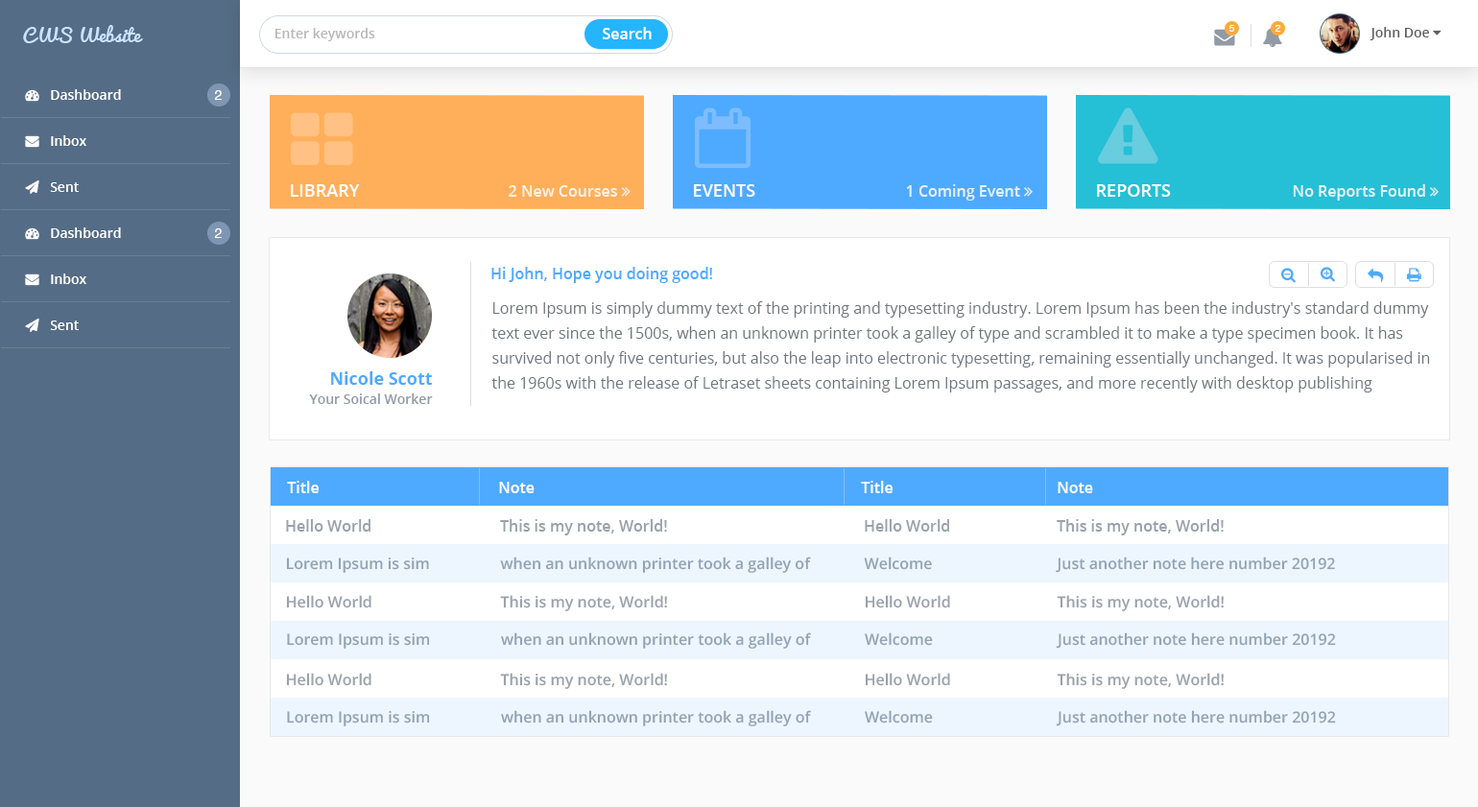
<style>
.page{position:relative;width:1478px;height:807px;background:#ffffff}
.page>*{position:absolute;margin:0}
.t1{font:18.3px "Pacifico";color:#cbe3ff}
.t2{font:13.4px "OpenSans-Semibold";color:#b8b8b8}
.t3{font:15.4px "OpenSans-Semibold";color:#ffffff}
.t4{font:9.7px "Helvetica";color:#ffffff}
.t5{font:9.6px "Helvetica";color:#ffffff}
.t6{font:13.4px "Helvetica";color:#ffffff}
.t7{font:17.3px "OpenSans-Semibold";color:#ffffff;text-transform:uppercase}
.t8{font:15.4px "OpenSans-Semibold";color:#4eaaff}
.t9{font:15.4px/24.9px "OpenSans";color:#70767d}
.t10{font:17.3px "OpenSans-Bold";color:#4eaaff}
.t11{font:13.4px "OpenSans-Semibold";color:#919aa5}
.t12{font:15.4px "OpenSans-Semibold";color:#9aa2ac}
</style>
<div class="page">
<p class="t1" style="left:23px;top:25px;width:120px;height:18px">CWS Website</p>
<p class="t2" style="left:274px;top:28px;width:101px;height:13px">Enter keywords</p>
<p class="t3" style="left:603px;top:27px;width:49px;height:12px">Search</p>
<p class="t4" style="left:1228px;top:25px;width:6px;height:7px">5</p>
<p class="t5" style="left:1274px;top:25px;width:6px;height:7px">2</p>
<p class="t6" style="left:214px;top:90px;width:8px;height:10px">2</p>
<p class="t7" style="left:291px;top:184px;width:69px;height:13px">Library</p>
<p class="t7" style="left:694px;top:184px;width:61px;height:13px">Events</p>
<p class="t7" style="left:1097px;top:184px;width:74px;height:13px">Reports</p>
<p class="t6" style="left:214px;top:228px;width:8px;height:10px">2</p>
<p class="t8" style="left:491px;top:267px;width:221px;height:16px">Hi John, Hope you doing good!</p>
<p class="t9" style="left:491px;top:301px;width:939px;height:91px">Lorem Ipsum is simply dummy text of the printing and typesetting industry. Lorem Ipsum has been the industry's standard dummy text ever since the 1500s, when an unknown printer took a galley of type and scrambled it to make a type specimen book. It has survived not only five centuries, but also the leap into electronic typesetting, remaining essentially unchanged. It was popularised in the 1960s with the release of Letraset sheets containing Lorem Ipsum passages, and more recently with desktop publishing software like Aldus PageMaker including versions of Lorem Ipsum</p>
<p class="t10" style="left:331px;top:371px;width:101px;height:14px">Nicole Scott</p>
<p class="t11" style="left:309px;top:393px;width:124px;height:11px">Your Soical Worker</p>
<p class="t3" style="left:287px;top:481px;width:33px;height:12px">Title</p>
<p class="t3" style="left:499px;top:482px;width:35px;height:11px">Note</p>
<p class="t3" style="left:861px;top:481px;width:32px;height:12px">Title</p>
<p class="t3" style="left:1057px;top:482px;width:36px;height:11px">Note</p>
<p class="t12" style="left:286px;top:519px;width:84px;height:13px">Hello World</p>
<p class="t12" style="left:500px;top:519px;width:167px;height:16px">This is my note, World!</p>
<p class="t12" style="left:865px;top:519px;width:84px;height:13px">Hello World</p>
<p class="t12" style="left:1056px;top:519px;width:167px;height:16px">This is my note, World!</p>
<p class="t12" style="left:286px;top:557px;width:143px;height:16px">Lorem Ipsum is sim</p>
<p class="t12" style="left:500px;top:557px;width:311px;height:16px">when an unknown printer took a galley of</p>
<p class="t12" style="left:864px;top:557px;width:68px;height:13px">Welcome</p>
<p class="t12" style="left:1055px;top:557px;width:280px;height:16px">Just another note here number 20192</p>
<p class="t12" style="left:286px;top:595px;width:85px;height:13px">Hello World</p>
<p class="t12" style="left:500px;top:595px;width:167px;height:16px">This is my note, World!</p>
<p class="t12" style="left:865px;top:595px;width:85px;height:13px">Hello World</p>
<p class="t12" style="left:1056px;top:595px;width:167px;height:16px">This is my note, World!</p>
<p class="t12" style="left:287px;top:632px;width:143px;height:17px">Lorem Ipsum is sim</p>
<p class="t12" style="left:501px;top:632px;width:310px;height:17px">when an unknown printer took a galley of</p>
<p class="t12" style="left:865px;top:632px;width:68px;height:14px">Welcome</p>
<p class="t12" style="left:1055px;top:632px;width:281px;height:17px">Just another note here number 20192</p>
<p class="t12" style="left:286px;top:673px;width:85px;height:13px">Hello World</p>
<p class="t12" style="left:500px;top:673px;width:167px;height:16px">This is my note, World!</p>
<p class="t12" style="left:865px;top:673px;width:85px;height:13px">Hello World</p>
<p class="t12" style="left:1056px;top:673px;width:167px;height:16px">This is my note, World!</p>
<p class="t12" style="left:287px;top:710px;width:143px;height:16px">Lorem Ipsum is sim</p>
<p class="t12" style="left:501px;top:710px;width:310px;height:16px">when an unknown printer took a galley of</p>
<p class="t12" style="left:865px;top:710px;width:68px;height:13px">Welcome</p>
<p class="t12" style="left:1055px;top:710px;width:281px;height:16px">Just another note here number 20192</p>
</div>
